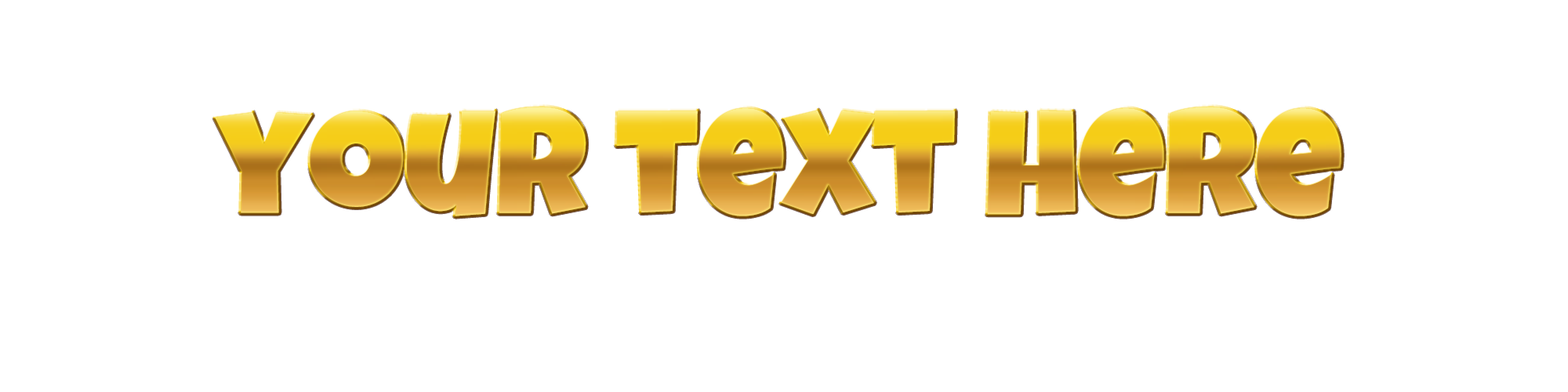
<style>
.page{position:relative;width:1568px;height:392px;background:#ffffff}
.page>*{position:absolute;margin:0}
.t1{font:149.7px "LuckiestGuy-Regular"}
</style>
<div class="page">
<p class="t1" style="left:215px;top:107px;width:1126px;height:109px">your text here</p>
</div>
